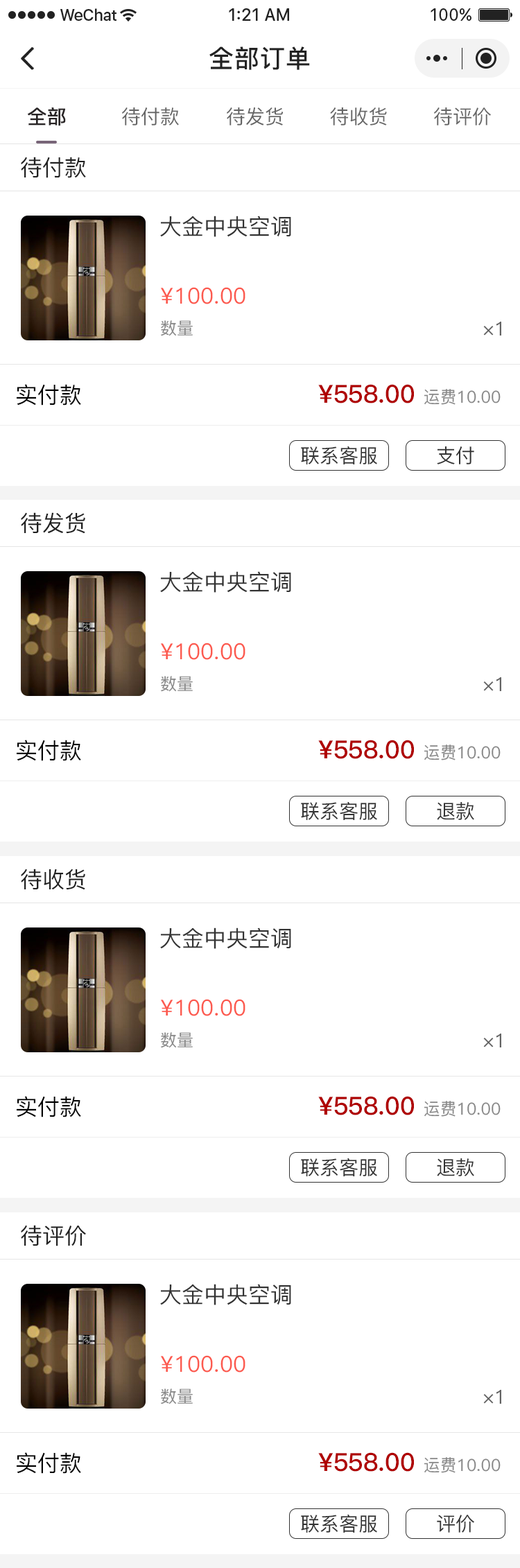
<style>
.page{position:relative;width:520px;height:1568px;background:#ffffff}
.page>*{position:absolute;margin:0}
.t1{font:25px "PingFang-SC-Bold";letter-spacing:0.028em;color:#222222}
.t2{font:19.4px "PingFang-SC-Medium";color:#282425;font-weight:bold}
.t3{font:19.4px "PingFang-SC-Medium";color:#666666}
.t4{font:22.2px "PingFang-SC-Medium";color:#202020}
.t5{font:22.2px "PingFang-SC-Medium";color:#333333;text-transform:uppercase}
.t6{font:22.2px "PingFang-SC-Medium";color:#fc5a4f;text-transform:uppercase}
.t7{font:16.6px "PingFang-SC-Medium";color:#888888;text-transform:uppercase}
.t8{font:19.4px "PingFang-SC-Medium";color:#636363;text-transform:uppercase}
.t9{font:22.2px "PingFang-SC-Medium";color:#000000;text-transform:uppercase}
.t10{font:25px "PingFang-SC-Bold";color:#af0000;text-transform:uppercase}
.t11{font:19.4px "PingFang-SC-Medium";color:#333333}
</style>
<div class="page">
<p class="t1" style="left:209px;top:46px;width:101px;height:24px">全部订单</p>
<p class="t2" style="left:28px;top:107px;width:38px;height:19px">全部</p>
<p class="t3" style="left:122px;top:107px;width:57px;height:18px">待付款</p>
<p class="t3" style="left:227px;top:107px;width:56px;height:18px">待发货</p>
<p class="t3" style="left:330px;top:107px;width:57px;height:18px">待收货</p>
<p class="t3" style="left:434px;top:107px;width:57px;height:18px">待评价</p>
<p class="t4" style="left:21px;top:157px;width:65px;height:21px">待付款</p>
<p class="t5" style="left:160px;top:216px;width:131px;height:21px">大金中央空调</p>
<p class="t6" style="left:161px;top:287px;width:84px;height:17px">¥100.00</p>
<p class="t7" style="left:161px;top:320px;width:32px;height:16px">数量</p>
<p class="t8" style="left:483px;top:322px;width:18px;height:14px">×1</p>
<p class="t9" style="left:17px;top:384px;width:64px;height:22px">实付款</p>
<p class="t10" style="left:318px;top:384px;width:182px;height:21px">¥558.00 <span class="t7">运费10.00</span></p>
<p class="t11" style="left:301px;top:446px;width:76px;height:18px">联系客服</p>
<p class="t11" style="left:437px;top:446px;width:37px;height:18px">支付</p>
<p class="t4" style="left:21px;top:512px;width:64px;height:22px">待发货</p>
<p class="t5" style="left:160px;top:571px;width:131px;height:22px">大金中央空调</p>
<p class="t6" style="left:161px;top:643px;width:84px;height:17px">¥100.00</p>
<p class="t7" style="left:161px;top:676px;width:32px;height:16px">数量</p>
<p class="t8" style="left:483px;top:677px;width:18px;height:14px">×1</p>
<p class="t9" style="left:17px;top:740px;width:64px;height:21px">实付款</p>
<p class="t10" style="left:318px;top:740px;width:182px;height:20px">¥558.00 <span class="t7">运费10.00</span></p>
<p class="t11" style="left:301px;top:802px;width:76px;height:18px">联系客服</p>
<p class="t11" style="left:437px;top:802px;width:37px;height:18px">退款</p>
<p class="t4" style="left:21px;top:869px;width:64px;height:21px">待收货</p>
<p class="t5" style="left:160px;top:927px;width:131px;height:22px">大金中央空调</p>
<p class="t6" style="left:161px;top:999px;width:84px;height:17px">¥100.00</p>
<p class="t7" style="left:161px;top:1032px;width:32px;height:16px">数量</p>
<p class="t8" style="left:483px;top:1034px;width:18px;height:13px">×1</p>
<p class="t9" style="left:17px;top:1096px;width:64px;height:21px">实付款</p>
<p class="t10" style="left:318px;top:1096px;width:182px;height:21px">¥558.00 <span class="t7">运费10.00</span></p>
<p class="t11" style="left:301px;top:1158px;width:76px;height:18px">联系客服</p>
<p class="t11" style="left:437px;top:1158px;width:37px;height:18px">退款</p>
<p class="t4" style="left:21px;top:1225px;width:65px;height:21px">待评价</p>
<p class="t5" style="left:160px;top:1284px;width:131px;height:21px">大金中央空调</p>
<p class="t6" style="left:161px;top:1355px;width:84px;height:18px">¥100.00</p>
<p class="t7" style="left:161px;top:1388px;width:32px;height:16px">数量</p>
<p class="t8" style="left:483px;top:1390px;width:18px;height:14px">×1</p>
<p class="t9" style="left:17px;top:1452px;width:64px;height:22px">实付款</p>
<p class="t10" style="left:318px;top:1452px;width:182px;height:21px">¥558.00 <span class="t7">运费10.00</span></p>
<p class="t11" style="left:301px;top:1515px;width:76px;height:18px">联系客服</p>
<p class="t11" style="left:437px;top:1515px;width:37px;height:18px">评价</p>
</div>
